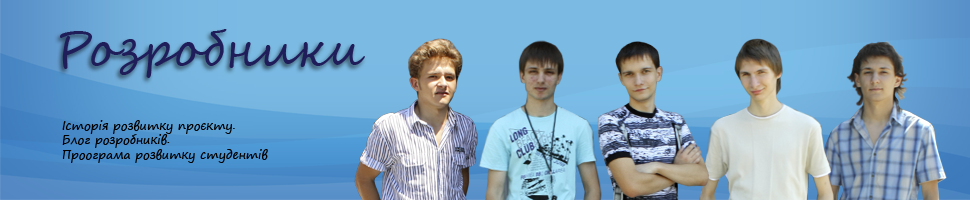
<style>
.page{position:relative;width:970px;height:200px}
.page>*{position:absolute;margin:0}
.t1{font:48px "SegoeScript";color:#201d5b}
.t2{font:12px "SegoePrint";color:#000000}
</style>
<div class="page">
<p class="t1" style="left:60px;top:29px;width:305px;height:49px">Розробники</p>
<p class="t2" style="left:62px;top:120px;width:206px;height:43px">Історія розвитку проєкту. <br>Блог розробників.<br>Проограма розвитку студентів</p>
</div>
